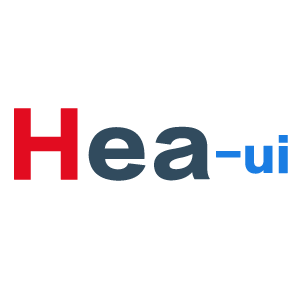
<style>
.page{position:relative;width:300px;height:300px;background:#ffffff}
.page>*{position:absolute;margin:0}
.t1{font:82px "FZLTTHK--GBK1-0";letter-spacing:0.02em;color:#314b5e;font-weight:bold}
.t2{font:82px "FZLTTHK--GBK1-0";letter-spacing:0.02em;color:#e20c20;font-weight:bold}
.t3{font:43.3px "FZLTTHK--GBK1-0";letter-spacing:0.02em;color:#1a7de3;font-weight:bold}
</style>
<div class="page">
<p class="t1" style="left:14px;top:108px;width:196px;height:73px"><span class="t2">H</span>ea</p>
<p class="t3" style="left:216px;top:135px;width:72px;height:39px">-ui</p>
</div>
